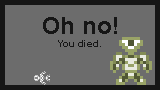
<style>
.page{position:relative;width:160px;height:90px;background:#6c6c6c}
.page>*{position:absolute;margin:0}
.t1{font:24px "Arial-BoldMT";color:#161616}
.t2{font:10px "Arial-BoldMT";color:#161616}
</style>
<div class="page">
<p class="t1" style="left:43px;top:17px;width:74px;height:17px">Oh no!</p>
<p class="t2" style="left:58px;top:40px;width:43px;height:7px">You died.</p>
</div>
